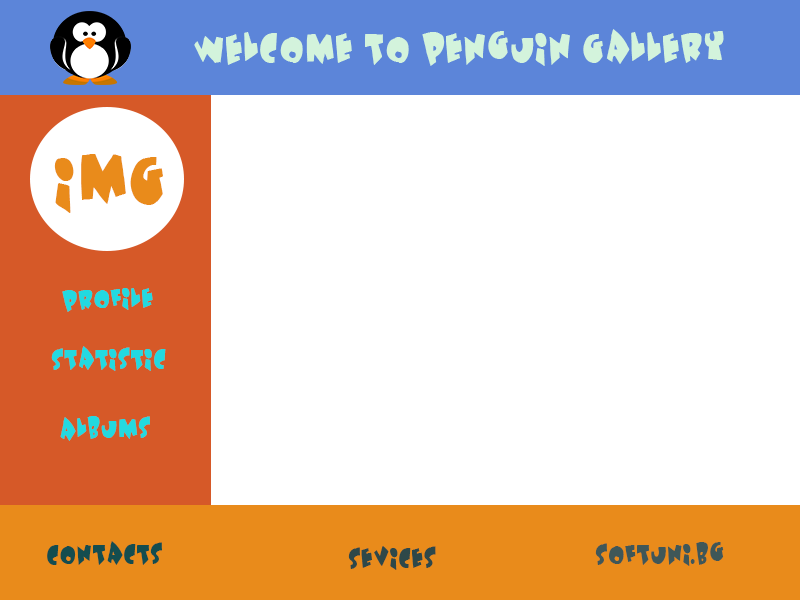
<style>
.page{position:relative;width:800px;height:600px;background:#ffffff}
.page>*{position:absolute;margin:0}
.t1{font:36px "Underattack";color:#d3f3dc}
.t2{font:60px "Underattack";color:#e98b1b}
.t3{font:24px "Underattack";color:#23d9e0}
.t4{font:24px "Underattack";color:#144d4f}
.t5{font:24px "Underattack";color:#3f5758}
.t6{font:24px "Underattack";color:#2e4849}
</style>
<div class="page">
<p class="t1" style="left:194px;top:29px;width:530px;height:37px">WElcome to penguin Gallery</p>
<p class="t2" style="left:54px;top:154px;width:109px;height:59px">IMG</p>
<p class="t3" style="left:62px;top:288px;width:91px;height:24px">PRofile</p>
<p class="t3" style="left:51px;top:346px;width:115px;height:25px">Statistic</p>
<p class="t3" style="left:60px;top:416px;width:90px;height:25px">Albums</p>
<p class="t4" style="left:47px;top:541px;width:115px;height:24px">Contacts</p>
<p class="t5" style="left:595px;top:542px;width:129px;height:24px">Softuni.bg</p>
<p class="t6" style="left:348px;top:546px;width:88px;height:24px">Sevices</p>
</div>
